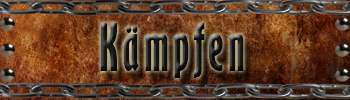
<style>
.page{position:relative;width:350px;height:100px}
.page>*{position:absolute;margin:0}
.t1{font:60px "GillSansMT-ExtraCondensedBold";letter-spacing:0.07em}
</style>
<div class="page">
<p class="t1" style="left:100px;top:23px;width:144px;height:55px">Kämpfen</p>
</div>
